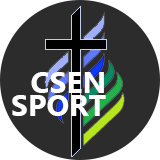
<style>
.page{position:relative;width:160px;height:160px;background:#2c2c2c}
.page>*{position:absolute;margin:0}
.t1{font:30.1px "SegoeUI-Bold";color:#ffffff}
</style>
<div class="page">
<p class="t1" style="left:31px;top:72px;width:73px;height:21px">CSEN</p>
<p class="t1" style="left:12px;top:95px;width:94px;height:21px">SPORT</p>
</div>
